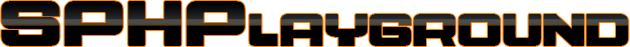
<style>
.page{position:relative;width:630px;height:47px;background:#ffffff}
.page>*{position:absolute;margin:0}
.t1{font:43px "SPACE-Regular";color:#000000}
.t2{font:60px "SPACE-Regular";color:#000000}
</style>
<div class="page">
<p class="t1" style="left:1px;top:1px;width:628px;height:45px"><span class="t2">SPHP</span>layground</p>
</div>
